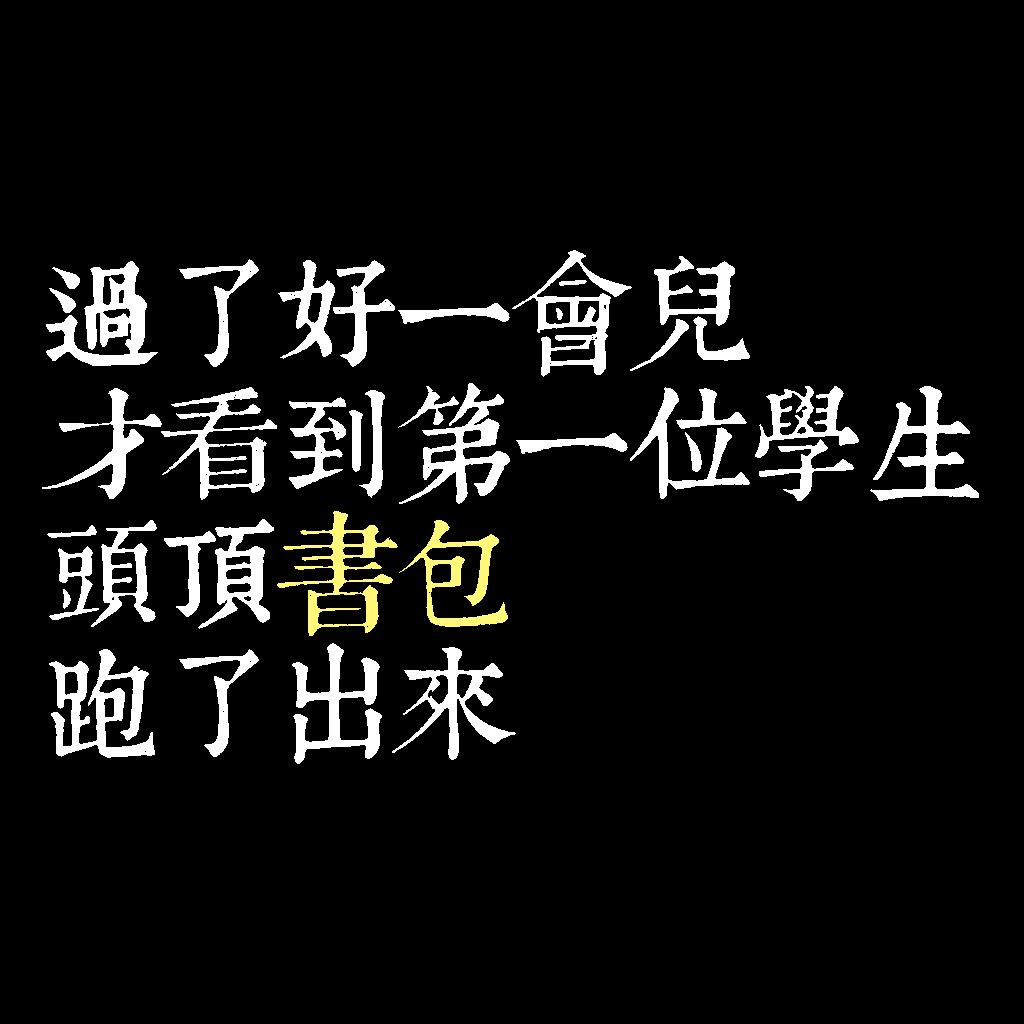
<style>
.page{position:relative;width:1024px;height:1024px;background:#000000}
.page>*{position:absolute;margin:0}
.t1{font:120px/130px "TpldKhangXiDictTrial";letter-spacing:-0.02em;color:#ffffff}
.t2{font:120px/130px "TpldKhangXiDictTrial";letter-spacing:-0.02em;color:#fff87a}
</style>
<div class="page">
<p class="t1" style="left:42px;top:250px;width:937px;height:514px">過了好一會兒<br>才看到第一位學生<br>頭頂<span class="t2">書包<br></span>跑了出來</p>
</div>
